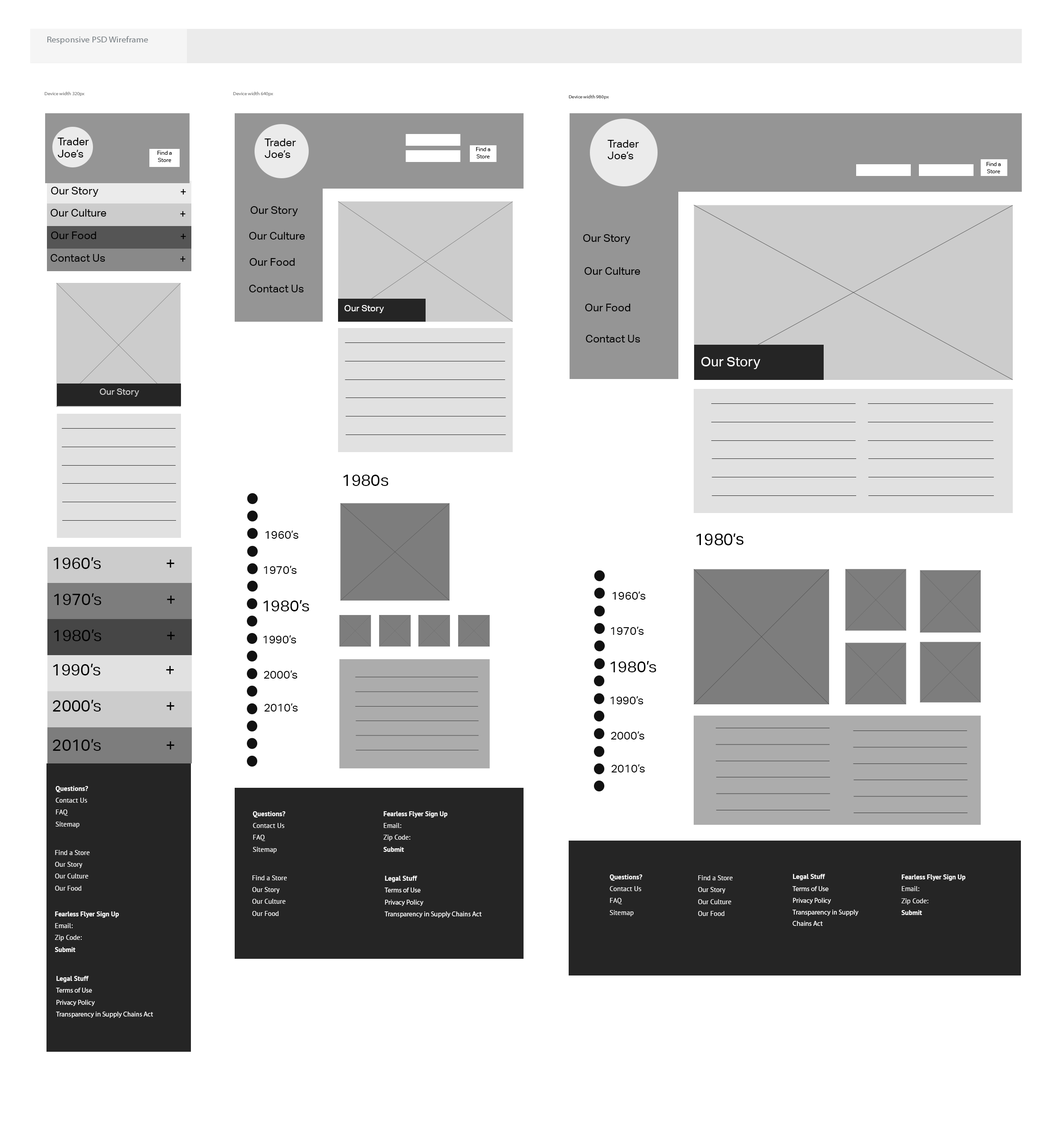
<style>
.page{position:relative;width:1057px;height:1128px;background:#ffffff}
.page>*{position:absolute;margin:0}
.t1{font:8.5px "MyriadPro-Regular";color:#787f84;scale:1.08 1}
.t2{font:4.5px "MyriadPro-Regular";color:#878787;scale:1.08 1}
.t3{font:4.5px "MyriadPro-Regular";color:#555555;scale:1.08 1}
.t4{font:10.8px/10.8px "AktivGrotesk-Regular";color:#000000}
.t5{font:5.4px/6.3px "AktivGrotesk-Regular";color:#000000}
.t6{font:10.8px "AktivGrotesk-Regular";color:#000000}
.t7{font:9px "AktivGrotesk-Regular";color:#ffffff}
.t8{font:13.5px "AktivGrotesk-Regular";color:#ffffff}
.t9{font:9px "AktivGrotesk-Regular";color:#cccccc}
.t10{font:16.2px "AktivGrotesk-Regular";color:#000000}
.t11{font:11.3px "AktivGrotesk-Regular";color:#000000}
.t12{font:16.2px "AktivGrotesk-Regular";color:#020202}
.t13{font:15.8px "AktivGrotesk-Regular";color:#000000}
.t14{font:6.9px/11.3px "PTSans-Regular";color:#ffffff}
.t15{font:6.9px/11.3px "PTSans-Bold";color:#ffffff}
.t16{font:6.8px/11.3px "PTSans-Bold";color:#ffffff}
.t17{font:6.8px/11.3px "PTSans-Regular";color:#ffffff}
.t18{font:6.8px/11.3px "MyriadPro-Regular";color:#ffffff}
</style>
<div class="page">
<p class="t1" style="left:47px;top:36px;width:101px;height:8px">Responsive PSD Wireframe</p>
<p class="t2" style="left:45px;top:92px;width:39px;height:4px">Device width 320px</p>
<p class="t2" style="left:233px;top:92px;width:40px;height:4px">Device width 640px</p>
<p class="t3" style="left:569px;top:95px;width:40px;height:4px">Device width 980px</p>
<p class="t4" style="left:57px;top:138px;width:32px;height:19px">Trader <br>Joe’s</p>
<p class="t4" style="left:264px;top:139px;width:32px;height:19px">Trader <br>Joe’s</p>
<p class="t5" style="left:476px;top:147px;width:14px;height:11px;text-align:center">Find a <br>Store</p>
<p class="t4" style="left:607px;top:140px;width:32px;height:19px">Trader <br>Joe’s</p>
<p class="t5" style="left:157px;top:151px;width:15px;height:11px;text-align:center">Find a <br>Store</p>
<p class="t5" style="left:987px;top:162px;width:14px;height:11px;text-align:center">Find a <br>Store</p>
<p class="t6" style="left:51px;top:187px;width:47px;height:10px">Our Story</p>
<p class="t6" style="left:181px;top:189px;width:5px;height:6px">+</p>
<p class="t6" style="left:51px;top:209px;width:56px;height:8px">Our Culture</p>
<p class="t6" style="left:250px;top:206px;width:48px;height:10px">Our Story</p>
<p class="t6" style="left:180px;top:211px;width:5px;height:6px">+</p>
<p class="t6" style="left:51px;top:232px;width:45px;height:7px">Our Food</p>
<p class="t6" style="left:181px;top:234px;width:5px;height:5px">+</p>
<p class="t6" style="left:249px;top:232px;width:56px;height:8px">Our Culture</p>
<p class="t6" style="left:583px;top:234px;width:47px;height:10px">Our Story</p>
<p class="t6" style="left:51px;top:254px;width:54px;height:8px">Contact Us</p>
<p class="t6" style="left:180px;top:256px;width:5px;height:6px">+</p>
<p class="t6" style="left:250px;top:258px;width:45px;height:8px">Our Food</p>
<p class="t6" style="left:584px;top:267px;width:56px;height:8px">Our Culture</p>
<p class="t6" style="left:249px;top:285px;width:55px;height:7px">Contact Us</p>
<p class="t7" style="left:344px;top:305px;width:40px;height:8px">Our Story</p>
<p class="t6" style="left:585px;top:304px;width:45px;height:7px">Our Food</p>
<p class="t6" style="left:586px;top:335px;width:54px;height:8px">Contact Us</p>
<p class="t8" style="left:701px;top:357px;width:59px;height:12px">Our Story</p>
<p class="t9" style="left:100px;top:389px;width:39px;height:8px">Our Story</p>
<p class="t10" style="left:343px;top:475px;width:46px;height:11px">1980s</p>
<p class="t11" style="left:265px;top:531px;width:33px;height:8px">1960’s</p>
<p class="t10" style="left:696px;top:533px;width:48px;height:13px">1980’s</p>
<p class="t12" style="left:53px;top:557px;width:121px;height:12px">1960’s    +</p>
<p class="t11" style="left:264px;top:566px;width:32px;height:8px">1970’s</p>
<p class="t12" style="left:54px;top:593px;width:121px;height:12px">1970’s    +</p>
<p class="t11" style="left:612px;top:592px;width:33px;height:8px">1960’s</p>
<p class="t13" style="left:263px;top:600px;width:46px;height:11px">1980’s</p>
<p class="t12" style="left:54px;top:630px;width:121px;height:11px">1980’s    +</p>
<p class="t11" style="left:611px;top:627px;width:33px;height:8px">1970’s</p>
<p class="t11" style="left:263px;top:635px;width:33px;height:9px">1990’s</p>
<p class="t12" style="left:53px;top:664px;width:121px;height:12px">1990’s    +</p>
<p class="t13" style="left:610px;top:661px;width:46px;height:11px">1980’s</p>
<p class="t11" style="left:264px;top:671px;width:33px;height:8px">2000’s</p>
<p class="t12" style="left:53px;top:700px;width:121px;height:12px">2000’s    +</p>
<p class="t11" style="left:610px;top:696px;width:33px;height:8px">1990’s</p>
<p class="t11" style="left:264px;top:704px;width:34px;height:8px">2010’s</p>
<p class="t11" style="left:611px;top:732px;width:33px;height:8px">2000’s</p>
<p class="t12" style="left:53px;top:739px;width:121px;height:12px">2010’s    +</p>
<p class="t11" style="left:611px;top:764px;width:34px;height:9px">2010’s</p>
<p class="t14" style="left:56px;top:786px;width:32px;height:42px"><span class="t15">Questions?<br></span>Contact Us<br>FAQ<br>Sitemap</p>
<p class="t14" style="left:253px;top:811px;width:32px;height:42px"><span class="t15">Questions?<br></span>Contact Us<br>FAQ<br>Sitemap</p>
<p class="t16" style="left:383px;top:811px;width:65px;height:41px">Fearless Flyer Sign Up<br><span class="t17">Email:<br>Zip Code:<br></span>Submit<br><span class="t17">Sug</span></p>
<p class="t17" style="left:55px;top:850px;width:35px;height:41px">Find a Store<br>Our Story<br>Our Culture<br>Our Food</p>
<p class="t17" style="left:252px;top:875px;width:35px;height:41px">Find a Store<br>Our Story<br>Our Culture<br>Our Food</p>
<p class="t18" style="left:384px;top:876px;width:98px;height:42px"><span class="t15">Legal Stuff<br></span>Terms of Use<br>Privacy Policy<br>Transparency in Supply Chains Act</p>
<p class="t14" style="left:610px;top:875px;width:32px;height:42px"><span class="t15">Questions?<br></span>Contact Us<br>FAQ<br>Sitemap</p>
<p class="t17" style="left:698px;top:875px;width:34px;height:41px">Find a Store<br>Our Story<br>Our Culture<br>Our Food</p>
<p class="t18" style="left:792px;top:874px;width:66px;height:52px"><span class="t15">Legal Stuff<br></span>Terms of Use<br>Privacy Policy<br>Transparency in Supply Chains Act</p>
<p class="t16" style="left:901px;top:875px;width:64px;height:40px">Fearless Flyer Sign Up<br><span class="t17">Email:<br>Zip Code:<br></span>Submit<br><span class="t17">Sug</span></p>
<p class="t16" style="left:55px;top:912px;width:64px;height:40px">Fearless Flyer Sign Up<br><span class="t17">Email:<br>Zip Code:<br></span>Submit<br><span class="t17">Sug</span></p>
<p class="t18" style="left:56px;top:976px;width:97px;height:42px"><span class="t15">Legal Stuff<br></span>Terms of Use<br>Privacy Policy<br>Transparency in Supply Chains Act</p>
</div>
